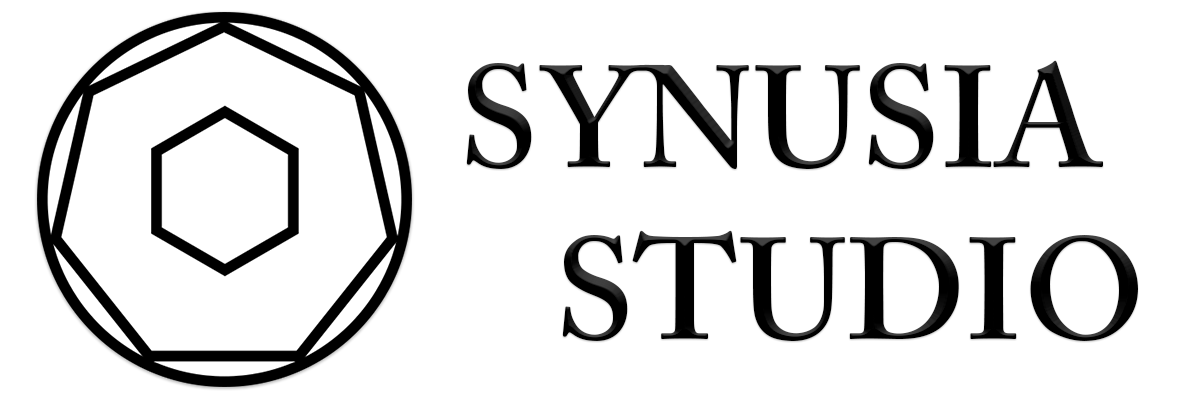
<style>
.page{position:relative;width:1200px;height:400px;background:#ffffff}
.page>*{position:absolute;margin:0}
.t1{font:143.6px "ACaslonPro-Semibold";color:#000000}
</style>
<div class="page">
<p class="t1" style="left:466px;top:60px;width:672px;height:281px;text-align:center">SYNUSIA<br>    STUDIO</p>
</div>
